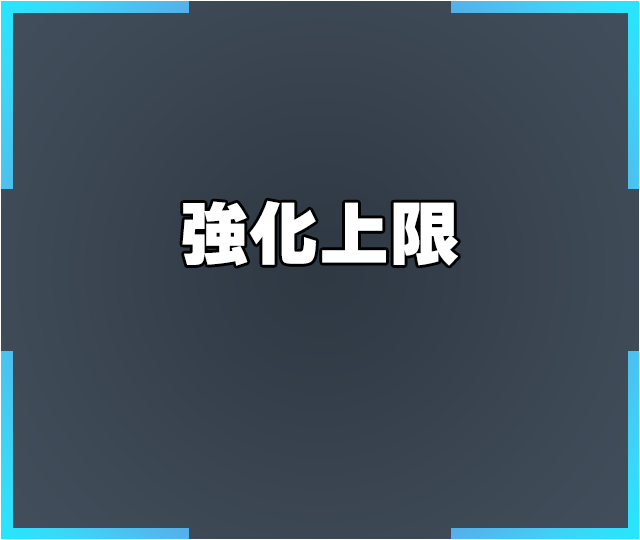
<style>
.page{position:relative;width:640px;height:540px}
.page>*{position:absolute;margin:0}
.t1{font:70px "WanpakuRuika-08";color:#ffffff}
</style>
<div class="page">
<p class="t1" style="left:182px;top:200px;width:276px;height:66px">強化上限</p>
</div>
